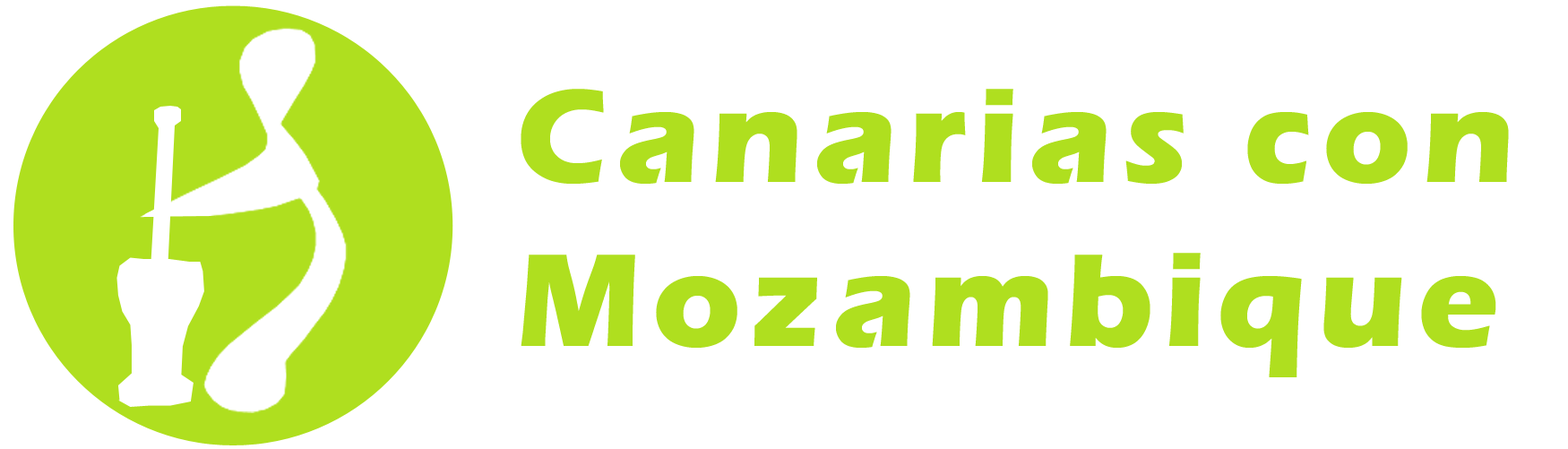
<style>
.page{position:relative;width:1568px;height:449px;background:#ffffff}
.page>*{position:absolute;margin:0}
.t1{font:136.9px "ErasITC-Bold";letter-spacing:0.075em;color:#afdf1f}
</style>
<div class="page">
<p class="t1" style="left:521px;top:89px;width:988px;height:288px">Canarias con <br>Mozambique</p>
</div>
